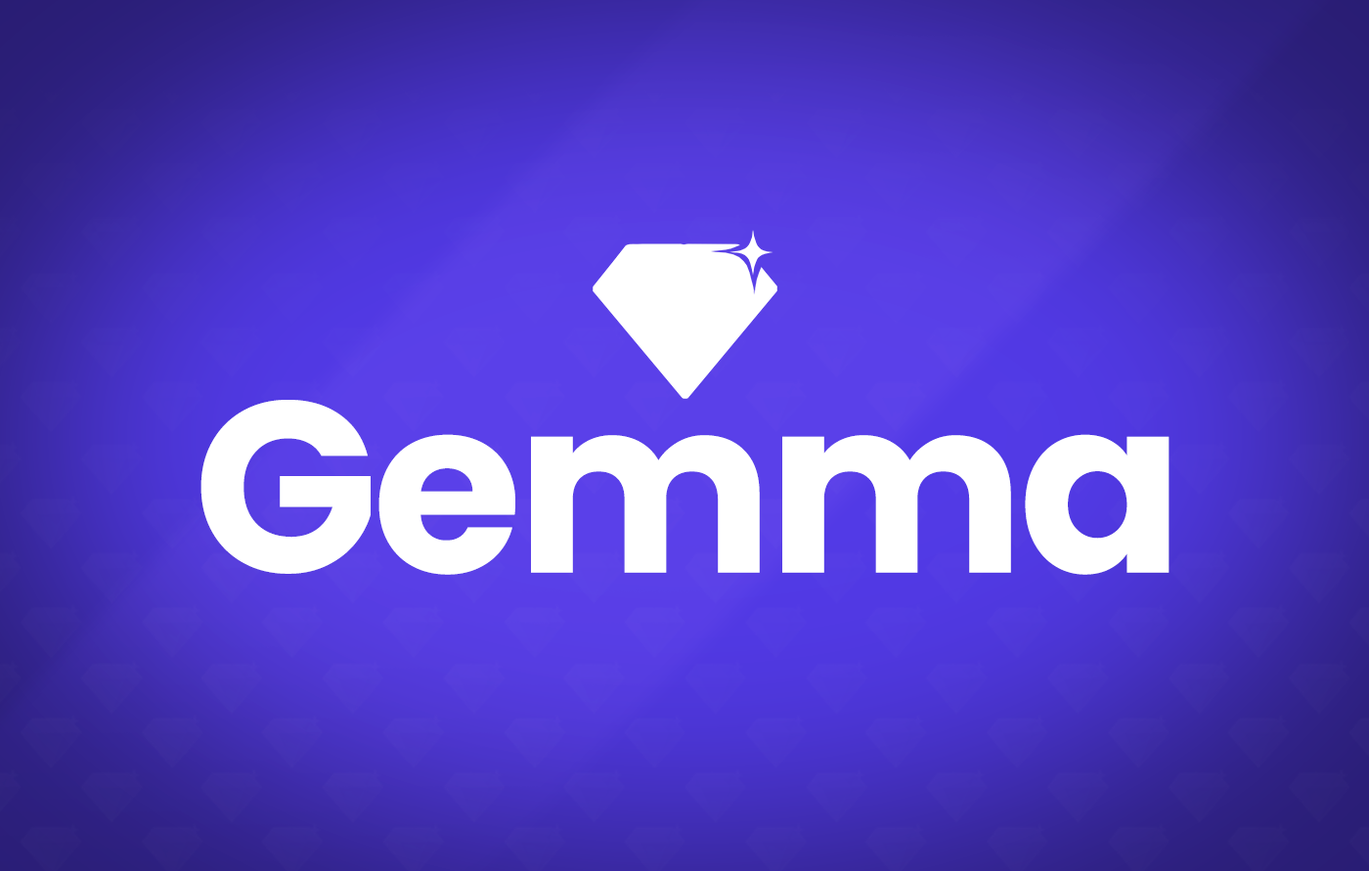
<style>
.page{position:relative;width:1369px;height:871px}
.page>*{position:absolute;margin:0}
.t1{font:243px "Poppins-Bold";letter-spacing:-0.025em;color:#ffffff}
</style>
<div class="page">
<p class="t1" style="left:200px;top:400px;width:969px;height:175px">Gemma</p>
</div>
